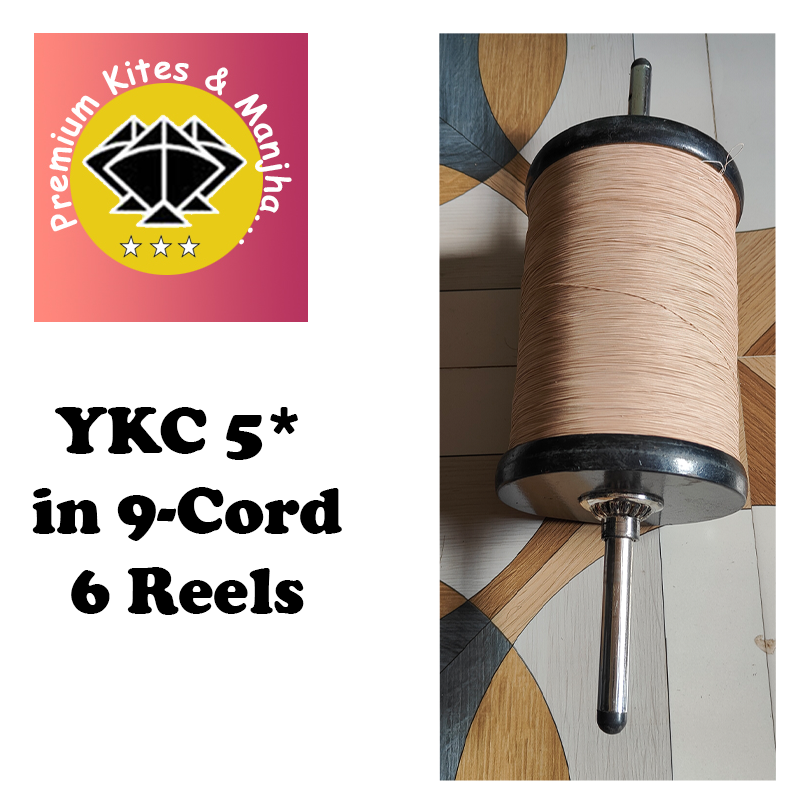
<style>
.page{position:relative;width:812px;height:804px;background:#ffffff}
.page>*{position:absolute;margin:0}
.t1{font:66.7px "CooperBlack";color:#000000}
</style>
<div class="page">
<p class="t1" style="left:32px;top:407px;width:310px;height:208px;text-align:center">YKC 5* <br>in 9-Cord<br>6 Reels</p>
</div>
